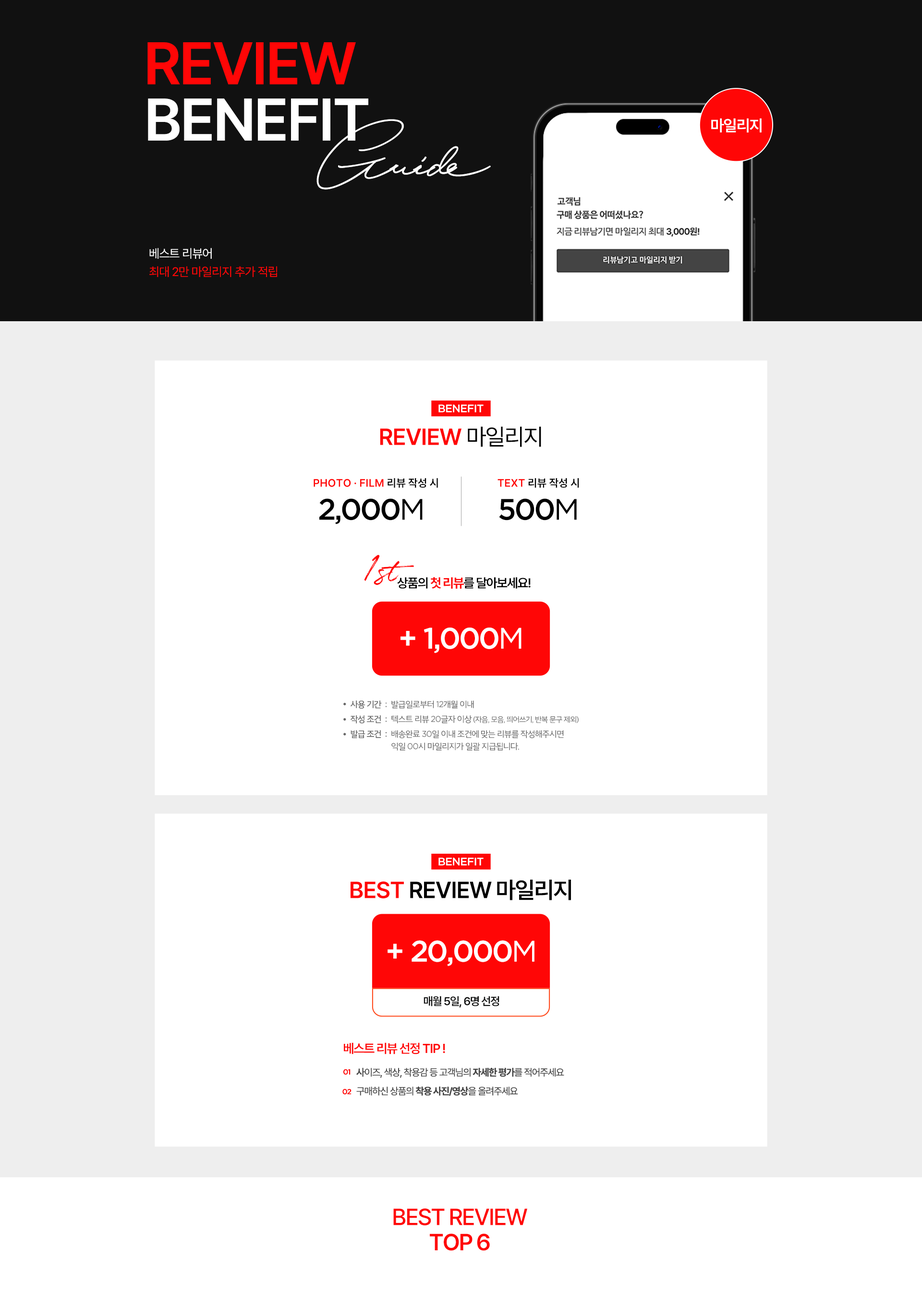
<style>
.page{position:relative;width:922px;height:1294px;background:#ffffff}
.page>*{position:absolute;margin:0}
.t1{font:59.3px "Pretendard-SemiBold";letter-spacing:-0.04em;color:#ff0606;text-transform:uppercase}
.t2{font:59.3px "Pretendard-SemiBold";letter-spacing:-0.04em;color:#ffffff;text-transform:uppercase}
.t3{font:59.3px "HijrnotesPERSONALUSEONLY";letter-spacing:-0.04em;color:#ffffff}
.t4{font:15.8px "Pretendard-SemiBold";letter-spacing:-0.04em;color:#ffffff}
.t5{font:12.3px/18.3px "Pretendard-Regular";letter-spacing:-0.04em;color:#ff0606}
.t6{font:12.3px/18.3px "Pretendard-Regular";letter-spacing:-0.04em;color:#ffffff}
.t7{font:10.9px "Gotham-Medium";letter-spacing:-0.04em;color:#ffffff;text-transform:uppercase}
.t8{font:23.2px "Pretendard-SemiBold";letter-spacing:-0.04em;color:#ff0606;text-transform:uppercase}
.t9{font:23.2px "Pretendard-Regular";letter-spacing:-0.04em;color:#000000;text-transform:uppercase}
.t10{font:10.9px "Pretendard-SemiBold";color:#ff0606;text-transform:uppercase}
.t11{font:10.9px "Pretendard-SemiBold";color:#000000;text-transform:uppercase}
.t12{font:29.6px "Gotham-Medium";letter-spacing:-0.06em;color:#000000;text-transform:uppercase}
.t13{font:29.6px "Gotham-Book";letter-spacing:-0.06em;color:#000000;text-transform:uppercase}
.t14{font:37px "Quentin";letter-spacing:-0.04em;color:#ff0606}
.t15{font:12.8px "Pretendard-SemiBold";letter-spacing:-0.06em;color:#000000;text-transform:uppercase}
.t16{font:12.8px "Pretendard-Bold";letter-spacing:-0.06em;color:#ff0606;text-transform:uppercase}
.t17{font:29.6px "Gotham-Medium";letter-spacing:-0.06em;color:#ffffff;text-transform:uppercase}
.t18{font:29.6px "Gotham-Medium";letter-spacing:0.2em;color:#ffffff;text-transform:uppercase}
.t19{font:29.6px "Gotham-Book";letter-spacing:-0.06em;color:#ffffff;text-transform:uppercase}
.t20{font:8.4px/14.8px "SDGothicNeob-cRg";letter-spacing:-0.06em;color:#666666;text-transform:uppercase}
.t21{font:7.4px/14.8px "SDGothicNeob-cRg";letter-spacing:-0.06em;color:#666666;text-transform:uppercase}
.t22{font:8.4px/14.8px "Gotham-Book";letter-spacing:-0.06em;color:#666666;text-transform:uppercase}
.t23{font:8.4px/12.3px "SDGothicNeob-cRg";letter-spacing:-0.06em;color:#666666;text-transform:uppercase}
.t24{font:8.4px/12.3px "Gotham-Book";letter-spacing:-0.06em;color:#666666;text-transform:uppercase}
.t25{font:23.2px "Pretendard-SemiBold";letter-spacing:-0.04em;color:#000000;text-transform:uppercase}
.t26{font:11.4px "Pretendard-SemiBold";letter-spacing:-0.06em;color:#111111;text-transform:uppercase}
.t27{font:12.8px "Pretendard-SemiBold";letter-spacing:-0.06em;color:#ff0606;text-transform:uppercase}
.t28{font:7.4px "Gotham-Medium";letter-spacing:-0.06em;color:#ff0606;text-transform:uppercase}
.t29{font:9.9px/18.8px "Pretendard-Regular";letter-spacing:-0.06em;color:#444444;text-transform:uppercase}
.t30{font:9.9px/18.8px "Pretendard-SemiBold";letter-spacing:-0.06em;color:#444444;text-transform:uppercase}
.t31{font:9.9px/18.8px "Pretendard-Bold";letter-spacing:-0.06em;color:#444444;text-transform:uppercase}
.t32{font:23.2px/32.6px "Pretendard-Medium";letter-spacing:-0.06em;color:#ff0606;text-transform:uppercase}
.t33{font:23.2px/25.2px "Pretendard-SemiBold";letter-spacing:-0.06em;color:#ff0606;text-transform:uppercase}
</style>
<div class="page">
<p class="t1" style="left:147px;top:42px;width:209px;height:42px">review</p>
<p class="t2" style="left:148px;top:98px;width:220px;height:43px">benefit</p>
<p class="t3" style="left:316px;top:119px;width:175px;height:71px">Guide</p>
<p class="t4" style="left:711px;top:118px;width:50px;height:14px">마일리지</p>
<p class="t5" style="left:149px;top:248px;width:128px;height:29px"><span class="t6">베스트 리뷰어<br></span>최대 2만 마일리지 추가 적립</p>
<p class="t7" style="left:438px;top:404px;width:45px;height:8px">benefit</p>
<p class="t8" style="left:380px;top:426px;width:161px;height:21px">review <span class="t9">마일리지</span></p>
<p class="t10" style="left:313px;top:478px;width:125px;height:10px">photo · film<span class="t11"> 리뷰 작성 시</span></p>
<p class="t11" style="left:497px;top:478px;width:82px;height:10px"><span class="t10">text</span> 리뷰 작성 시</p>
<p class="t12" style="left:319px;top:498px;width:103px;height:26px">2,000<span class="t13">M</span></p>
<p class="t12" style="left:499px;top:498px;width:78px;height:22px">500<span class="t13">M</span></p>
<p class="t14" style="left:364px;top:554px;width:50px;height:31px">1st</p>
<p class="t15" style="left:397px;top:577px;width:133px;height:12px">상품의 <span class="t16">첫 리뷰</span>를 달아보세요!</p>
<p class="t17" style="left:400px;top:627px;width:121px;height:26px"><span class="t18">+</span>1,000<span class="t19">M</span></p>
<p class="t20" style="left:350px;top:700px;width:36px;height:38px">사용 기간  :<br>작성 조건  :<br>발급 조건  :</p>
<p class="t21" style="left:391px;top:700px;width:187px;height:50px"><span class="t20">발급일로부터</span><span class="t22"> 12</span><span class="t20">개월 이내<br>텍스트 리뷰 </span><span class="t22">20</span><span class="t20">글자 이상</span> (자음, 모음, 띄어쓰기, 반복 문구 제외)<br><span class="t20">배송완료 </span><span class="t22">30</span><span class="t20">일 이내 조건에 맞는 리뷰를 작성해주시면 <br></span><span class="t23">익일 </span><span class="t24">00</span><span class="t23">시 마일리지가 일괄 지급됩니다.</span></p>
<p class="t7" style="left:438px;top:857px;width:45px;height:9px">benefit</p>
<p class="t25" style="left:350px;top:879px;width:221px;height:21px"><span class="t8">best </span>review 마일리지</p>
<p class="t17" style="left:387px;top:940px;width:147px;height:26px"><span class="t18">+</span>20,000<span class="t19">M</span></p>
<p class="t26" style="left:423px;top:996px;width:76px;height:12px">매월 5일, 6명 선정</p>
<p class="t27" style="left:344px;top:1042px;width:101px;height:12px">베스트 리뷰 선정 TIP !</p>
<p class="t28" style="left:343px;top:1069px;width:7px;height:6px">01</p>
<p class="t29" style="left:356px;top:1068px;width:208px;height:27px"><span class="t30">사</span>이즈, 색상, 착용감 등 고객님의 <span class="t31">자세한 평가</span>를 적어주세요<br>구매하신 상품의 <span class="t31">착용 사진/영상</span>을 올려주세요</p>
<p class="t28" style="left:342px;top:1088px;width:9px;height:7px">02</p>
<p class="t32" style="left:393px;top:1208px;width:134px;height:43px;text-align:center">best review<br><span class="t33">top 6</span></p>
</div>
